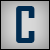
<style>
.page{position:relative;width:50px;height:50px}
.page>*{position:absolute;margin:0}
.t1{font:48px "AgencyFB-Bold";color:#002b50}
</style>
<div class="page">
<p class="t1" style="left:16px;top:6px;width:19px;height:37px">C</p>
</div>
